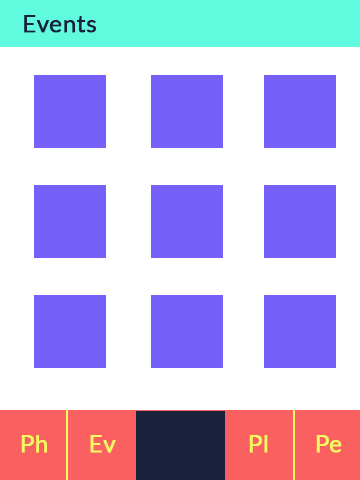
<style>
.page{position:relative;width:360px;height:480px;background:#ffffff}
.page>*{position:absolute;margin:0}
.t1{font:24px "Lato-Regular";color:#18213d;font-weight:bold}
.t2{font:24px "Lato-Regular";color:#f1fa60;font-weight:bold}
</style>
<div class="page">
<p class="t1" style="left:24px;top:15px;width:72px;height:18px">Events</p>
<p class="t2" style="left:21px;top:435px;width:26px;height:18px">Ph</p>
<p class="t2" style="left:90px;top:435px;width:26px;height:18px">Ev</p>
<p class="t2" style="left:249px;top:435px;width:19px;height:18px">Pl</p>
<p class="t2" style="left:316px;top:435px;width:26px;height:18px">Pe</p>
</div>
